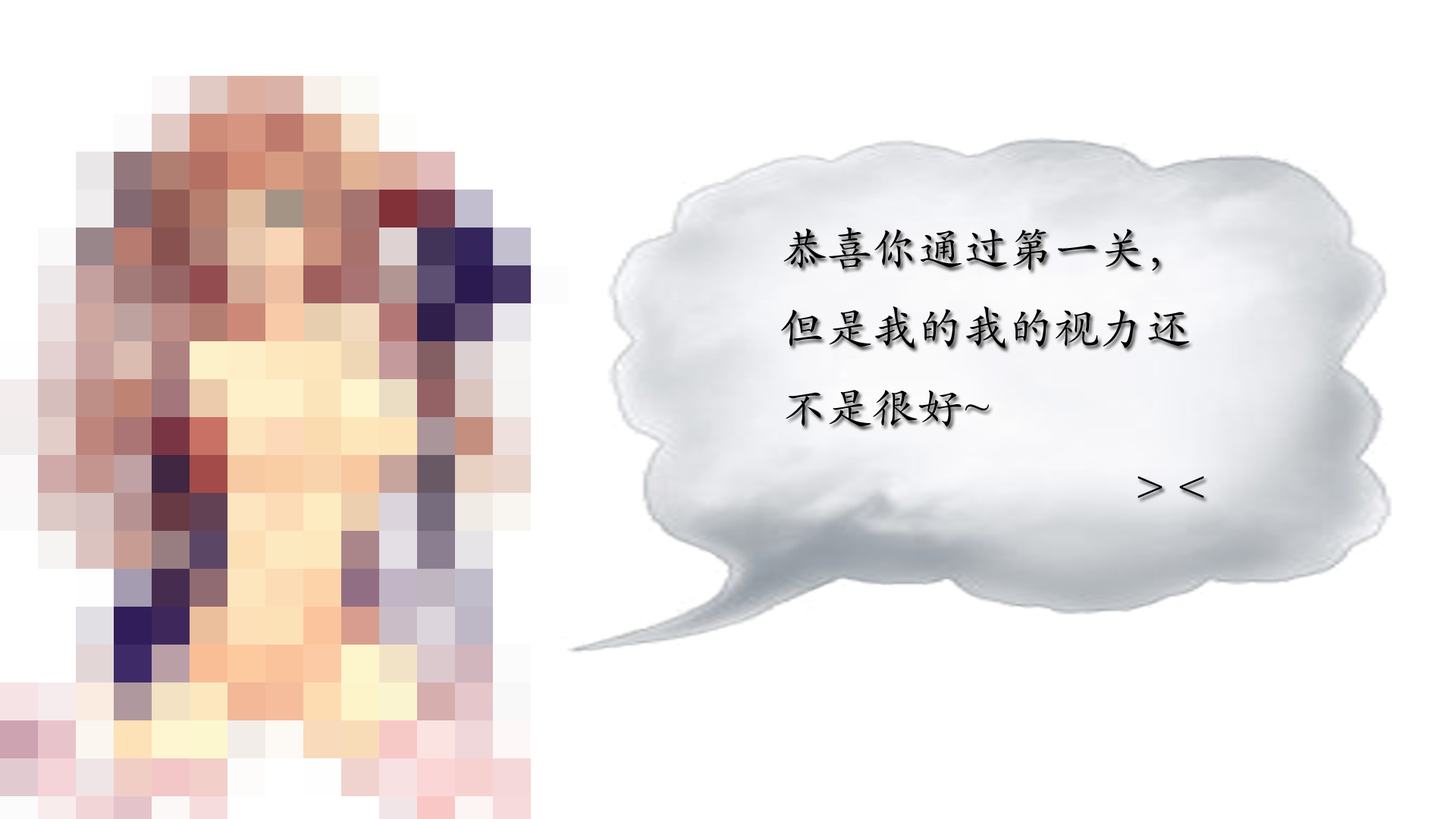
<style>
.page{position:relative;width:1456px;height:819px;background:#ffffff}
.page>*{position:absolute;margin:0}
.t1{font:45.5px "STKaiti";color:#000000}
</style>
<div class="page">
<p class="t1" style="left:781px;top:227px;width:423px;height:271px">恭喜你通过第一关，但是我的我的视力还不是很好~<br>             &gt; &lt;</p>
</div>
